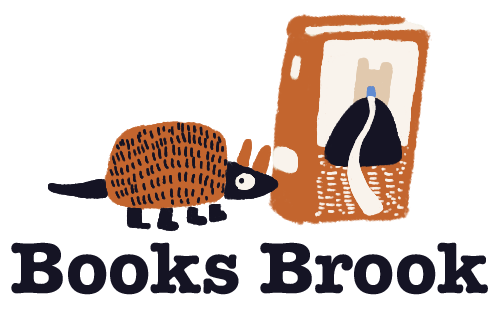
<style>
.page{position:relative;width:500px;height:321px;background:#ffffff}
.page>*{position:absolute;margin:0}
.t1{font:74.7px "AmericanTypewriter-Bold";color:#151424}
</style>
<div class="page">
<p class="t1" style="left:11px;top:242px;width:477px;height:53px">Books Brook</p>
</div>
